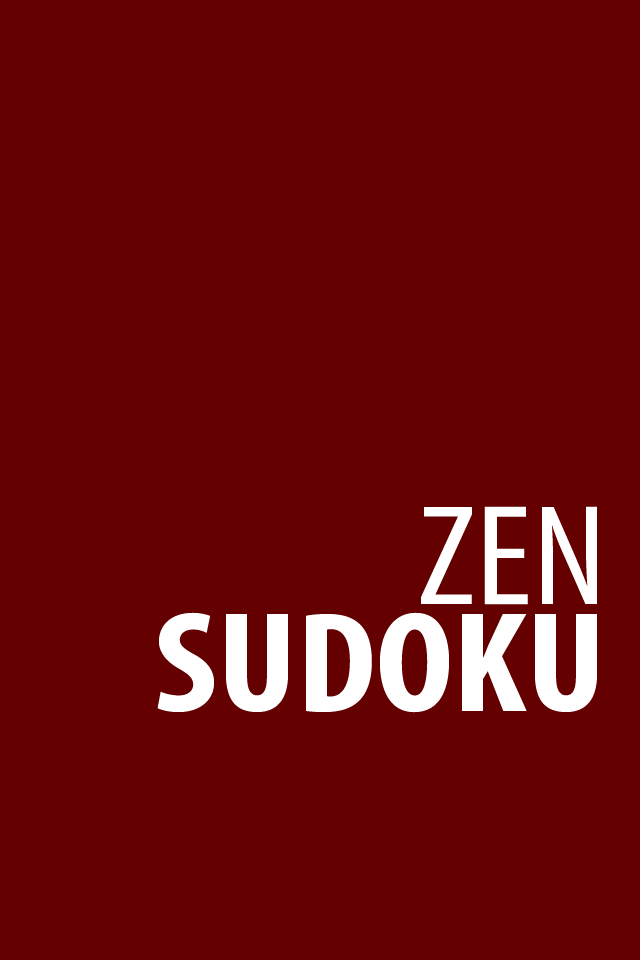
<style>
.page{position:relative;width:640px;height:960px;background:#640000}
.page>*{position:absolute;margin:0}
.t1{font:144px "MyriadPro-Cond";color:#ffffff;text-transform:uppercase;scale:1.11 1}
.t2{font:144px "MyriadPro-BoldCond";color:#ffffff;text-transform:uppercase;scale:1.11 1}
</style>
<div class="page">
<p class="t1" style="left:421px;top:506px;width:176px;height:99px">Zen</p>
<p class="t2" style="left:157px;top:612px;width:440px;height:101px">Sudoku</p>
</div>
